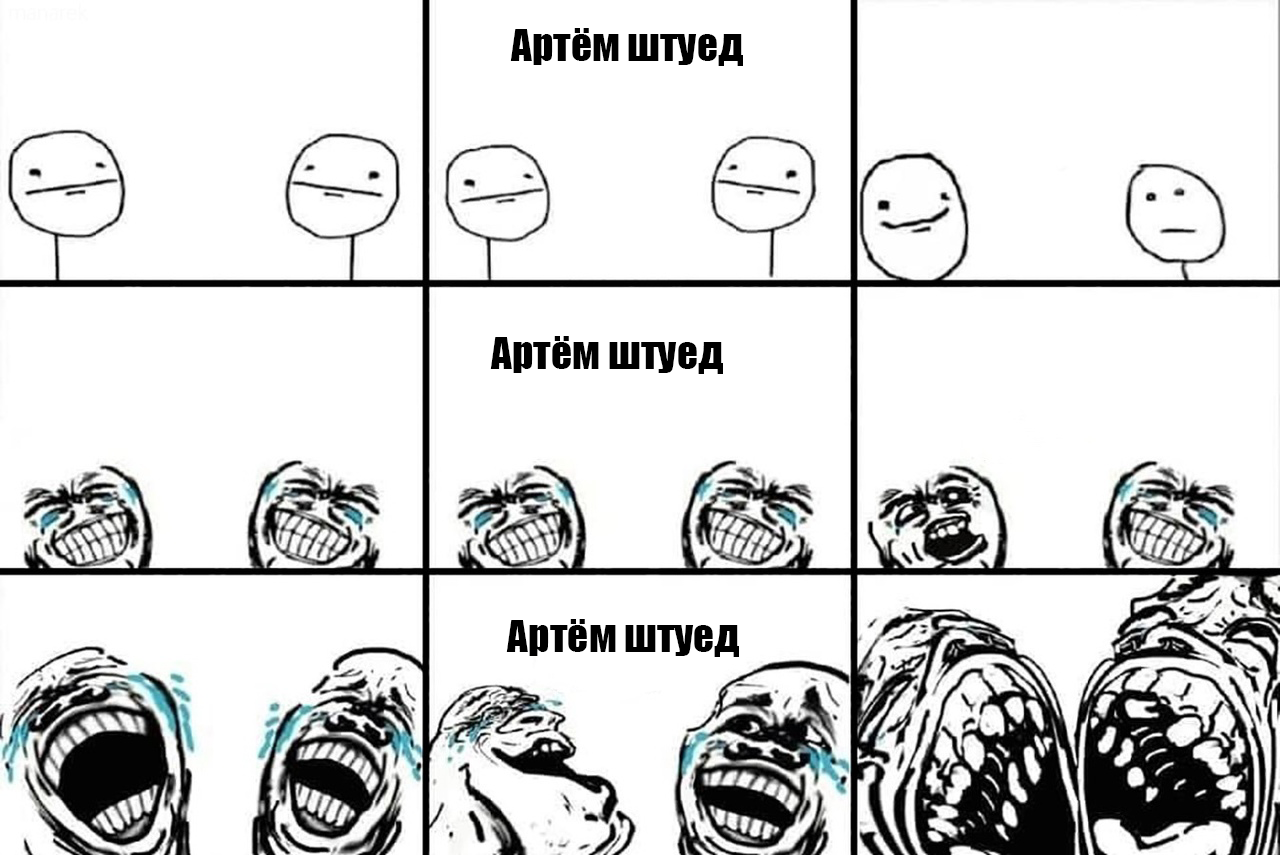
<style>
.page{position:relative;width:1280px;height:855px;background:#ffffff}
.page>*{position:absolute;margin:0}
.t1{font:41.3px "Impact";color:#000000}
</style>
<div class="page">
<p class="t1" style="left:510px;top:28px;width:233px;height:38px">Артём штуед</p>
<p class="t1" style="left:490px;top:336px;width:233px;height:38px">Артём штуед</p>
<p class="t1" style="left:506px;top:619px;width:233px;height:38px">Артём штуед</p>
</div>
